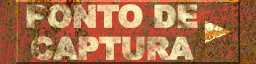
<style>
.page{position:relative;width:256px;height:64px}
.page>*{position:absolute;margin:0}
.t1{font:30.7px/32px "Arial-Black";letter-spacing:-0.04em;text-transform:uppercase;font-weight:bold}
</style>
<div class="page">
<p class="t1" style="left:26px;top:4px;width:172px;height:56px;text-align:center">ponto de<br>captura</p>
</div>
